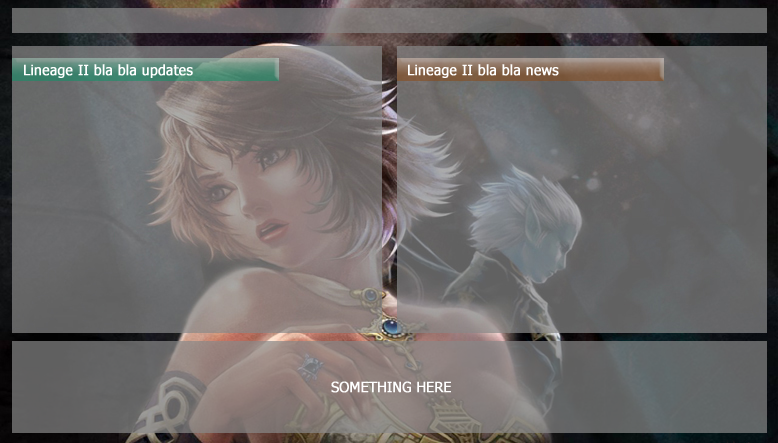
<style>
.page{position:relative;width:778px;height:443px}
.page>*{position:absolute;margin:0}
.t1{font:13.9px "Tahoma";color:#ffffff;font-weight:bold}
</style>
<div class="page">
<p class="t1" style="left:24px;top:64px;width:169px;height:14px">Lineage II bla bla updates</p>
<p class="t1" style="left:408px;top:64px;width:151px;height:14px">Lineage II bla bla news</p>
<p class="t1" style="left:331px;top:381px;width:120px;height:12px">SOMETHING HERE</p>
</div>
